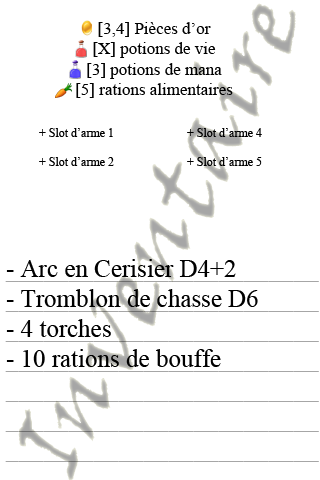
<style>
.page{position:relative;width:320px;height:480px;background:#ffffff}
.page>*{position:absolute;margin:0}
.t1{font:103.9px "VinerHandITC";color:#b1b1ae}
.t2{font:17px "TimesNewRomanPSMT";color:#000000}
.t3{font:12px "TimesNewRomanPSMT";color:#000000}
.t4{font:25px "TimesNewRomanPSMT";color:#000000}
</style>
<div class="page">
<p class="t1" style="left:18px;top:3px;width:278px;height:478px;rotate:-63deg">Inventaire</p>
<p class="t2" style="left:76px;top:22px;width:157px;height:76px;text-align:center">[3,4] Pièces d’or<br>[X] potions de vie<br>[3] potions de mana<br>[5] rations alimentaires</p>
<p class="t3" style="left:39px;top:128px;width:75px;height:38px">+ Slot d’arme 1<br><br>+ Slot d’arme 2</p>
<p class="t3" style="left:187px;top:128px;width:75px;height:38px">+ Slot d’arme 4<br><br>+ Slot d’arme 5</p>
<p class="t4" style="left:6px;top:259px;width:252px;height:108px">- Arc en Cerisier D4+2<br>- Tromblon de chasse D6<br>- 4 torches<br>- 10 rations de bouffe</p>
</div>
